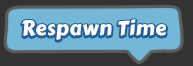
<style>
.page{position:relative;width:193px;height:66px;background:#74b7d7}
.page>*{position:absolute;margin:0}
.t1{font:20px "CarterOne";letter-spacing:0.025em;color:#ffffff}
</style>
<div class="page">
<p class="t1" style="left:22px;top:19px;width:144px;height:21px">Respawn Time</p>
</div>
